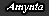
<style>
.page{position:relative;width:49px;height:16px;background:#333333}
.page>*{position:absolute;margin:0}
.t1{font:14px "Vijaya-Bold";color:#ffffff}
</style>
<div class="page">
<p class="t1" style="left:7px;top:3px;width:36px;height:10px">Amynta</p>
</div>
